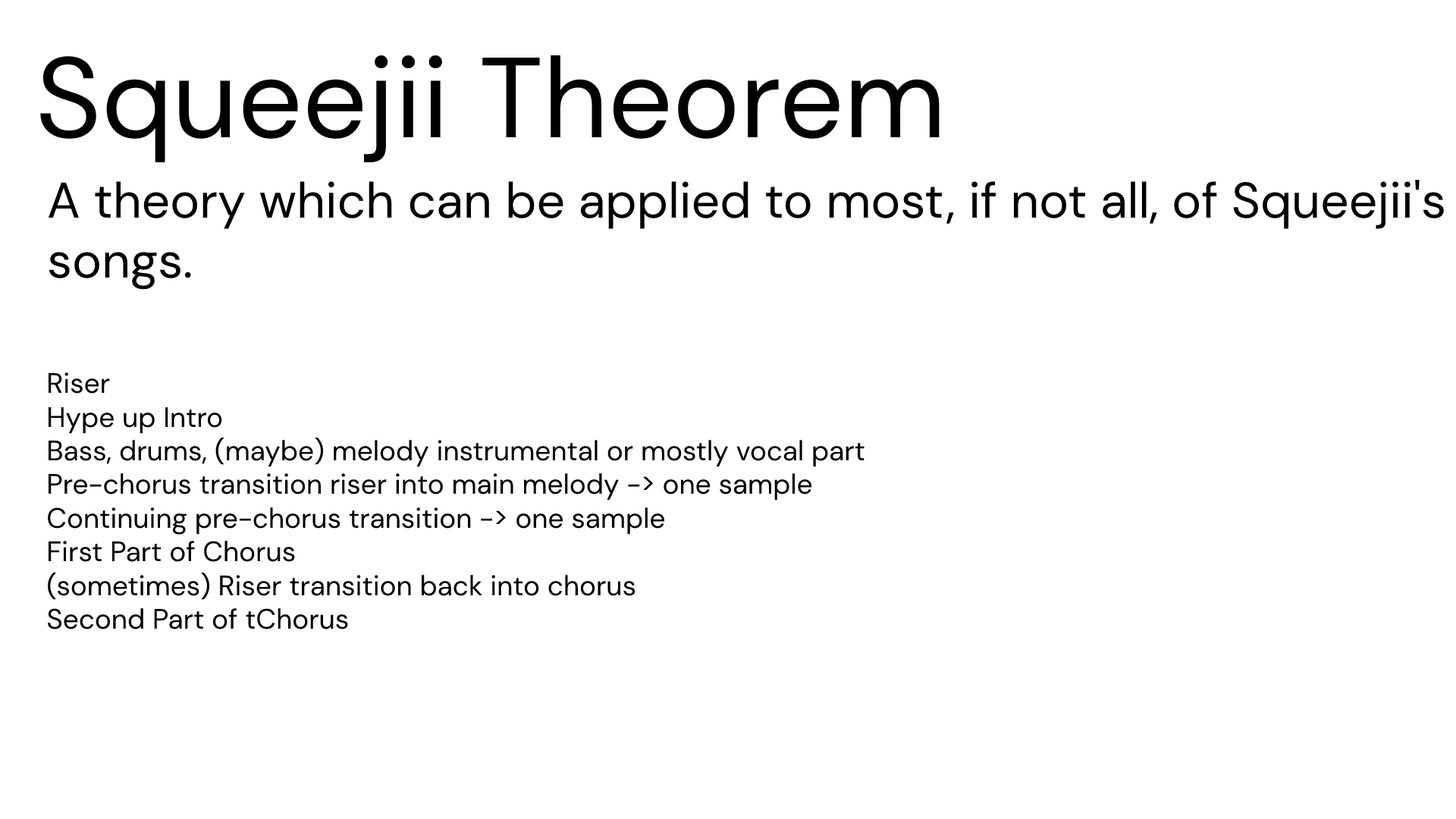
<style>
.page{position:relative;width:1456px;height:819px;background:#ffffff}
.page>*{position:absolute;margin:0}
.t1{font:113.7px "DMSans-Regular";color:#000000}
.t2{font:50px "DMSans-Regular";color:#000000}
.t3{font:28.1px "DMSans-Regular";color:#000000}
</style>
<div class="page">
<p class="t1" style="left:40px;top:55px;width:900px;height:107px">Squeejii Theorem</p>
<p class="t2" style="left:48px;top:180px;width:1396px;height:110px">A theory which can be applied to most, if not all, of Squeejii's<br>songs.</p>
<p class="t3" style="left:47px;top:372px;width:817px;height:257px">Riser <br>Hype up Intro <br>Bass, drums, (maybe) melody instrumental or mostly vocal part<br>Pre-chorus transition riser into main melody -&gt; one sample<br>Continuing pre-chorus transition -&gt; one sample<br>First Part of Chorus<br>(sometimes) Riser transition back into chorus <br>Second Part of tChorus</p>
</div>
